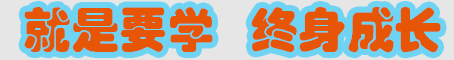
<style>
.page{position:relative;width:454px;height:60px;background:#e75606}
.page>*{position:absolute;margin:0}
.t1{font:48px "STHupo";color:#e75606}
</style>
<div class="page">
<p class="t1" style="left:24px;top:7px;width:417px;height:46px">就是要学   终身成长</p>
</div>
